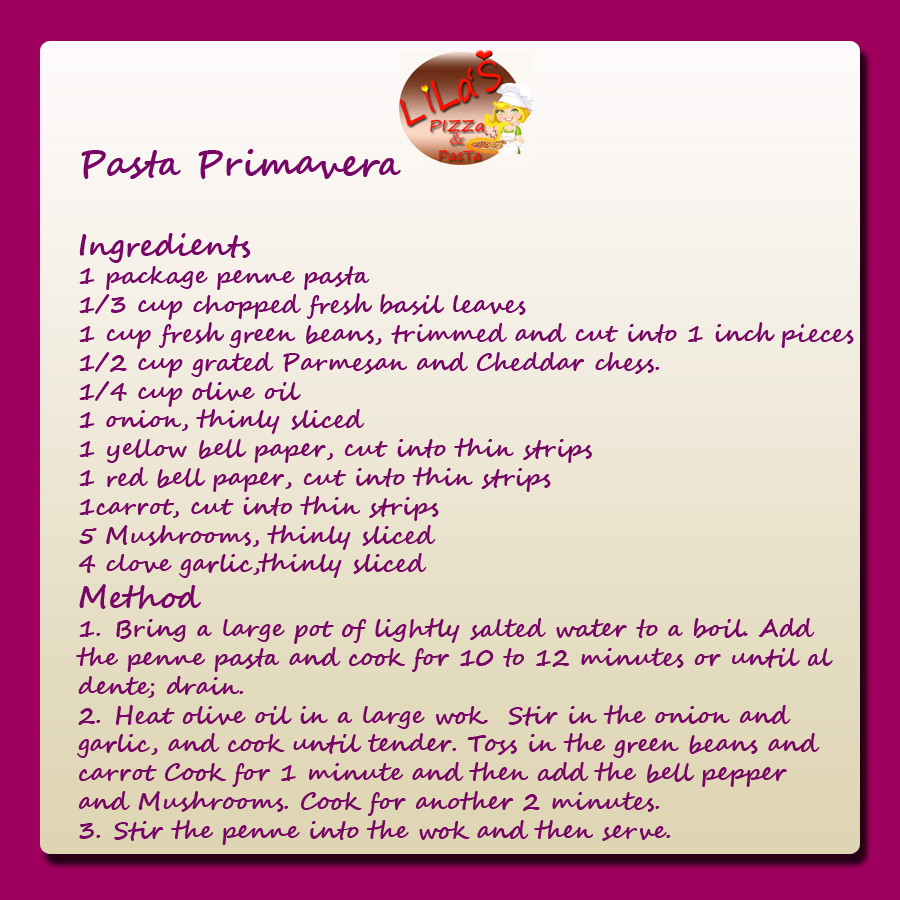
<style>
.page{position:relative;width:900px;height:900px}
.page>*{position:absolute;margin:0}
.t1{font:24px "SegoeScript-Bold";color:#770666}
.t2{font:36px "SegoeScript-Bold";color:#770666}
.t3{font:30px "SegoeScript-Bold";color:#770666}
</style>
<div class="page">
<p class="t1" style="left:76px;top:149px;width:778px;height:696px"><span class="t2"><br><br>Pasta Primavera<br><br></span><span class="t3">Ingredients<br></span>1 package penne pasta<br>1/3 cup chopped fresh basil leaves<br>1 cup fresh green beans, trimmed and cut into 1 inch pieces<br>1/2 cup grated Parmesan and Cheddar chess.<br>1/4 cup olive oil<br>1 onion, thinly sliced<br>1 yellow bell paper, cut into thin strips<br>1 red bell paper, cut into thin strips<br>1carrot, cut into thin strips<br>5 Mushrooms, thinly sliced<br>4 clove garlic,thinly sliced <br><span class="t3">Method<br></span>1. Bring a large pot of lightly salted water to a boil. Add <br>the penne pasta and cook for 10 to 12 minutes or until al <br>dente; drain.<br>2. Heat olive oil in a large wok.  Stir in the onion and <br>garlic, and cook until tender. Toss in the green beans and <br>carrot Cook for 1 minute and then add the bell pepper <br>and Mushrooms. Cook for another 2 minutes.<br>3. Stir the penne into the wok and then serve.</p>
</div>
